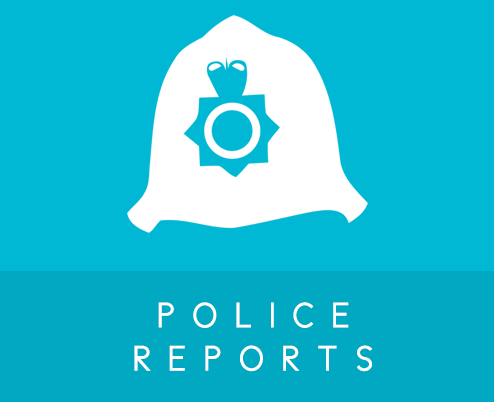
<style>
.page{position:relative;width:494px;height:402px;background:#00b8d3}
.page>*{position:absolute;margin:0}
.t1{font:36px "CicleGordita";letter-spacing:0.5em;color:#ffffff;text-transform:uppercase}
</style>
<div class="page">
<p class="t1" style="left:134px;top:302px;width:239px;height:70px;text-align:center">Police<br>Reports</p>
</div>
